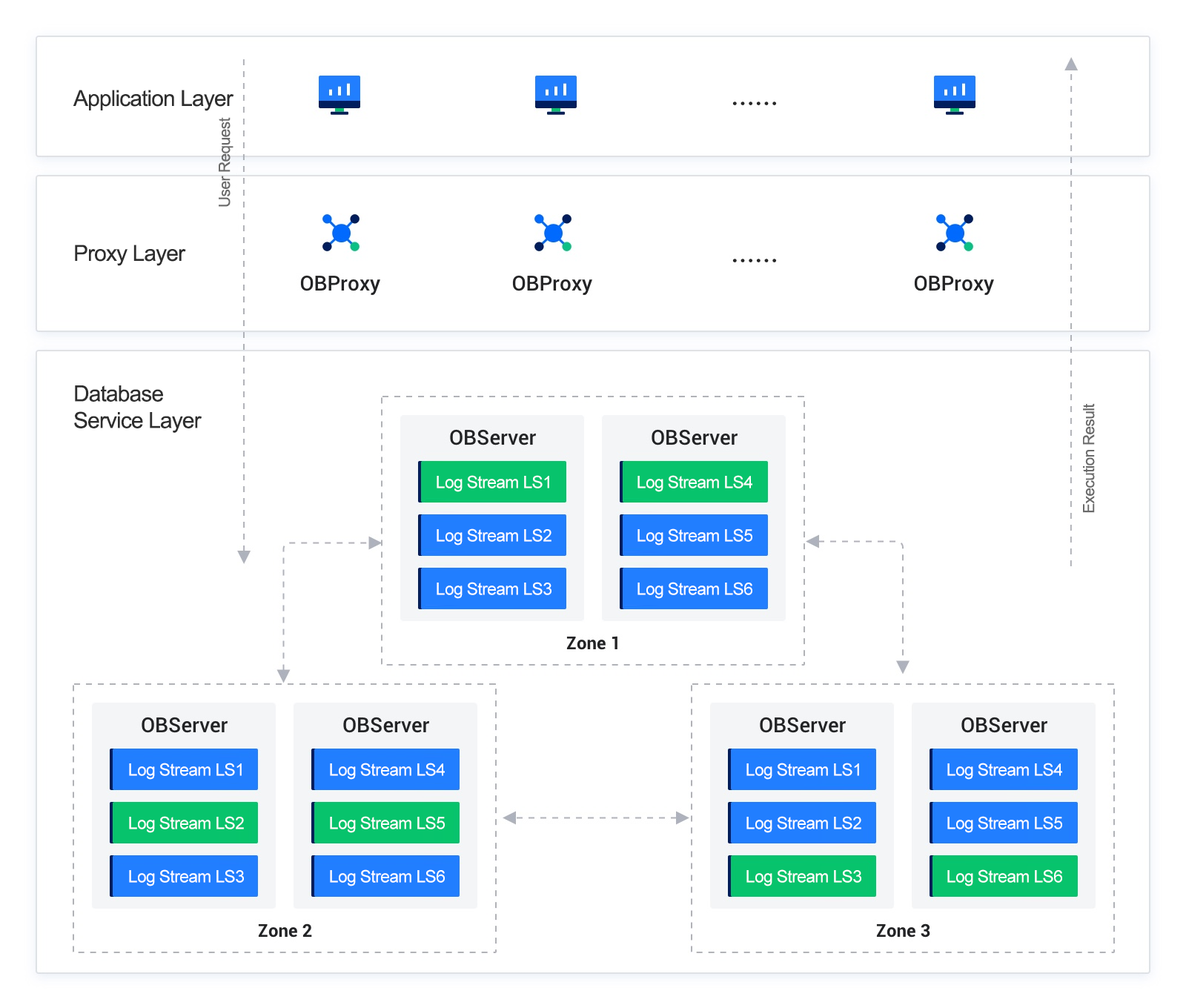
<style>
.page{position:relative;width:1186px;height:1005px;background:#ffffff}
.page>*{position:absolute;margin:0}
.t1{font:22.2px "ArialMT";letter-spacing:-0.03em;color:#2e2e2e}
.t2{font:15.6px "ArialMT";letter-spacing:-0.03em;color:#6a6a6a}
.t3{font:22.2px/26.7px "ArialMT";letter-spacing:-0.03em;color:#2e2e2e}
.t4{font:17.1px "ArialMT";letter-spacing:-0.03em;color:#ffffff}
</style>
<div class="page">
<p class="t1" style="left:73px;top:90px;width:161px;height:21px">Application Layer</p>
<p class="t2" style="left:219px;top:117px;width:15px;height:90px;rotate:-90deg">User Request</p>
<p class="t1" style="left:75px;top:245px;width:111px;height:21px">Proxy Layer</p>
<p class="t3" style="left:74px;top:386px;width:128px;height:47px">Database Service Layer</p>
<p class="t2" style="left:1083px;top:403px;width:12px;height:110px;rotate:-90deg">Execution Result</p>
<p class="t4" style="left:437px;top:475px;width:112px;height:17px">Log Stream LS1</p>
<p class="t4" style="left:638px;top:475px;width:114px;height:17px">Log Stream LS4</p>
<p class="t4" style="left:437px;top:529px;width:115px;height:17px">Log Stream LS2</p>
<p class="t4" style="left:638px;top:529px;width:114px;height:17px">Log Stream LS5</p>
<p class="t4" style="left:437px;top:582px;width:115px;height:17px">Log Stream LS3</p>
<p class="t4" style="left:638px;top:582px;width:114px;height:17px">Log Stream LS6</p>
<p class="t4" style="left:129px;top:763px;width:113px;height:17px">Log Stream LS1</p>
<p class="t4" style="left:330px;top:763px;width:115px;height:17px">Log Stream LS4</p>
<p class="t4" style="left:747px;top:763px;width:112px;height:17px">Log Stream LS1</p>
<p class="t4" style="left:947px;top:763px;width:115px;height:17px">Log Stream LS4</p>
<p class="t4" style="left:129px;top:816px;width:115px;height:17px">Log Stream LS2</p>
<p class="t4" style="left:330px;top:816px;width:115px;height:17px">Log Stream LS5</p>
<p class="t4" style="left:747px;top:816px;width:114px;height:17px">Log Stream LS2</p>
<p class="t4" style="left:947px;top:816px;width:115px;height:17px">Log Stream LS5</p>
<p class="t4" style="left:129px;top:870px;width:115px;height:17px">Log Stream LS3</p>
<p class="t4" style="left:330px;top:870px;width:115px;height:17px">Log Stream LS6</p>
<p class="t4" style="left:747px;top:870px;width:114px;height:17px">Log Stream LS3</p>
<p class="t4" style="left:947px;top:870px;width:115px;height:17px">Log Stream LS6</p>
</div>
